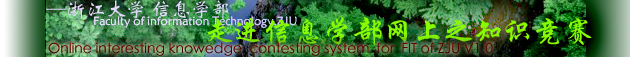
<style>
.page{position:relative;width:630px;height:57px}
.page>*{position:absolute;margin:0}
.t1{font:20px "STXinwei";color:#e2d9fc}
.t2{font:12px "STXinwei";color:#e2d9fc}
.t3{font:30px "STXingkai";color:#88fa02}
.t4{font:14px "STXihei";color:#560000}
</style>
<div class="page">
<p class="t1" style="left:46px;top:0px;width:182px;height:19px">—浙江大学 信息学部</p>
<p class="t2" style="left:94px;top:16px;width:203px;height:12px">Faculty of information Technology,ZJU</p>
<p class="t3" style="left:207px;top:16px;width:385px;height:30px">走进信息学部网上之知识竞赛</p>
<p class="t4" style="left:48px;top:42px;width:445px;height:14px">Online interesting knowedge  contesting system  for  FIT of ZJU V1.0</p>
</div>
